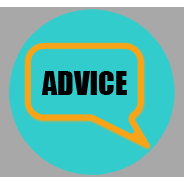
<style>
.page{position:relative;width:184px;height:184px;background:#33cccc}
.page>*{position:absolute;margin:0}
.t1{font:30px "Impact";color:#000000}
</style>
<div class="page">
<p class="t1" style="left:41px;top:71px;width:86px;height:24px">ADVICE</p>
</div>
